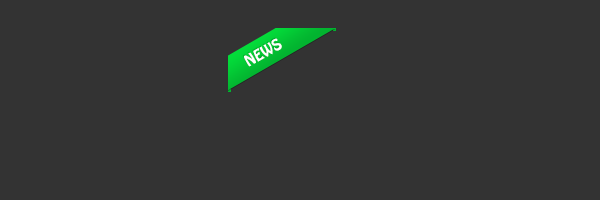
<style>
.page{position:relative;width:600px;height:200px;background:#333333}
.page>*{position:absolute;margin:0}
.t1{font:14px "HoboStd";letter-spacing:0.02em;color:#ffffff}
</style>
<div class="page">
<p class="t1" style="left:244px;top:38px;width:38px;height:29px;rotate:-30deg">NEWS</p>
</div>
